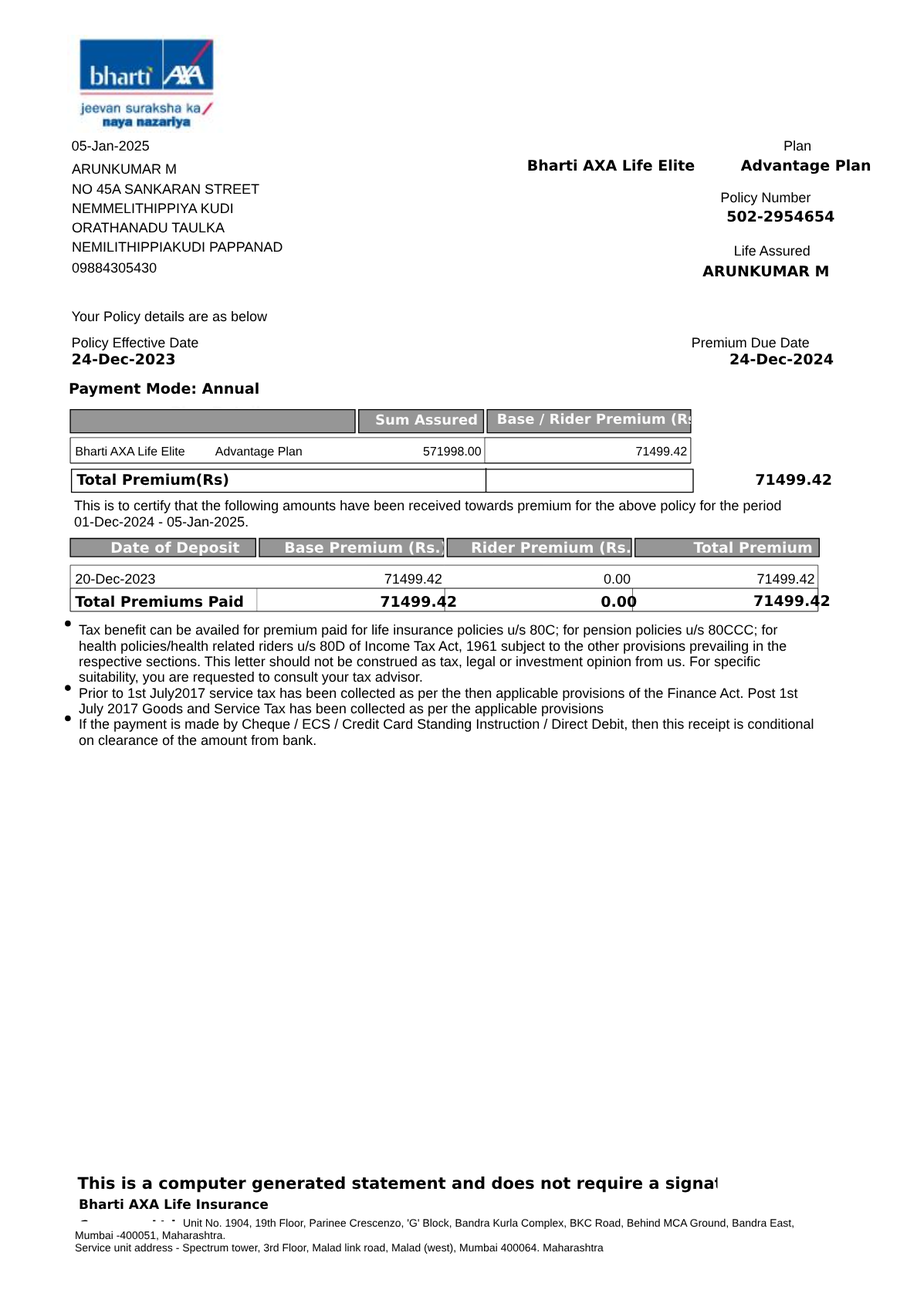
<style>
.page{position:relative;width:917px;height:1300px;background:#ffffff}
.page>*{position:absolute;margin:0}
.t1{font:13.9px "ArialMT";color:#000000}
.t2{font:14.7px "Arial-Bold";color:#000000}
.t3{font:13.9px/19.4px "ArialMT";color:#000000}
.t4{font:13.9px/15.7px "ArialMT";color:#000000}
.t5{font:13.9px/19.5px "ArialMT";color:#000000}
.t6{font:13.9px/20.7px "ArialMT";color:#000000}
.t7{font:14.7px/23.1px "Arial-Bold";color:#fafafa}
.t8{font:13.9px "Arial-Bold";color:#fafafa}
.t9{font:12.4px "ArialMT";color:#000000}
.t10{font:13.9px/23.1px "ArialMT";color:#000000}
.t11{font:14.7px "Arial-Bold";color:#fafafa}
.t12{font:16.2px "Arial-Bold";color:#000000}
.t13{font:13.1px/20.7px "Arial-Bold";color:#000000}
.t14{font:13.1px/17px "Arial-Bold";color:#000000}
.t15{font:10.8px/17px "ArialMT";color:#000000}
.t16{font:10.8px/12.6px "ArialMT";color:#000000}
</style>
<div class="page">
<p class="t1" style="left:72px;top:141px;width:77px;height:10px">05-Jan-2025</p>
<p class="t1" style="left:784px;top:140px;width:27px;height:11px">Plan</p>
<p class="t2" style="left:528px;top:159px;width:343px;height:15px">Bharti AXA Life Elite         Advantage Plan</p>
<p class="t3" style="left:72px;top:164px;width:211px;height:109px"><span class="t4">ARUNKUMAR M</span><br>NO 45A SANKARAN STREET<span class="t5"><br>NEMMELITHIPPIYA KUDI</span><br>ORATHANADU TAULKA<br>NEMILITHIPPIAKUDI PAPPANAD<span class="t6"><br>09884305430</span></p>
<p class="t1" style="left:721px;top:191px;width:90px;height:14px">Policy Number</p>
<p class="t2" style="left:727px;top:210px;width:108px;height:12px">502-2954654</p>
<p class="t1" style="left:735px;top:245px;width:75px;height:11px">Life Assured</p>
<p class="t2" style="left:703px;top:266px;width:125px;height:11px">ARUNKUMAR M</p>
<p class="t1" style="left:72px;top:310px;width:196px;height:14px">Your Policy details are as below</p>
<p class="t1" style="left:73px;top:337px;width:125px;height:14px">Policy Effective Date</p>
<p class="t1" style="left:693px;top:337px;width:116px;height:11px">Premium Due Date</p>
<p class="t2" style="left:73px;top:353px;width:102px;height:12px">24-Dec-2023</p>
<p class="t2" style="left:730px;top:353px;width:104px;height:12px">24-Dec-2024</p>
<p class="t2" style="left:69px;top:382px;width:200px;height:36px">Payment Mode: Annual<span class="t7"><br>Plan Details</span></p>
<p class="t8" style="left:376px;top:414px;width:101px;height:11px">Sum Assured</p>
<p class="t8" style="left:498px;top:413px;width:209px;height:13px">Base / Rider Premium (Rs.)</p>
<p class="t9" style="left:76px;top:446px;width:226px;height:13px">Bharti AXA Life Elite         Advantage Plan</p>
<p class="t9" style="left:423px;top:446px;width:59px;height:10px">571998.00</p>
<p class="t9" style="left:636px;top:446px;width:51px;height:10px">71499.42</p>
<p class="t2" style="left:76px;top:473px;width:755px;height:14px">Total Premium(Rs)                                                                                                       71499.42</p>
<p class="t10" style="left:74px;top:500px;width:707px;height:27px">This is to certify that the following amounts have been received towards premium for the above policy for the period   <span class="t4"><br>01-Dec-2024 - 05-Jan-2025.</span></p>
<p class="t11" style="left:111px;top:541px;width:129px;height:15px">Date of Deposit</p>
<p class="t11" style="left:286px;top:541px;width:160px;height:14px">Base Premium (Rs.)</p>
<p class="t11" style="left:472px;top:541px;width:165px;height:14px">Rider Premium (Rs.)</p>
<p class="t11" style="left:693px;top:541px;width:119px;height:13px">Total Premium</p>
<p class="t1" style="left:76px;top:574px;width:79px;height:10px">20-Dec-2023</p>
<p class="t1" style="left:384px;top:574px;width:58px;height:10px">71499.42</p>
<p class="t1" style="left:604px;top:574px;width:27px;height:10px">0.00</p>
<p class="t1" style="left:757px;top:574px;width:57px;height:10px">71499.42</p>
<p class="t2" style="left:75px;top:595px;width:168px;height:13px">Total Premiums Paid</p>
<p class="t2" style="left:381px;top:595px;width:75px;height:13px">71499.42</p>
<p class="t2" style="left:601px;top:595px;width:36px;height:13px">0.00</p>
<p class="t2" style="left:754px;top:594px;width:76px;height:13px">71499.42</p>
<p class="t4" style="left:79px;top:624px;width:735px;height:122px">Tax benefit can be availed for premium paid for life insurance policies u/s 80C; for pension policies u/s 80CCC; for <br>health policies/health related riders u/s 80D of Income Tax Act, 1961 subject to the other provisions prevailing in the <br>respective sections. This letter should not be construed as tax, legal or investment opinion from us. For specific <br>suitability, you are requested to consult your tax advisor.<br>Prior to 1st July2017 service tax has been collected as per the then applicable provisions of the Finance Act. Post 1st <br>July 2017 Goods and Service Tax has been collected as per the applicable provisions<br>If the payment is made by Cheque / ECS / Credit Card Standing Instruction / Direct Debit, then this receipt is conditional <br>on clearance of the amount from bank.</p>
<p class="t12" style="left:77px;top:1177px;width:681px;height:16px">This is a computer generated statement and does not require a signature.</p>
<p class="t13" style="left:79px;top:1199px;width:190px;height:34px">Bharti AXA Life Insurance Company Ltd.<span class="t14"><br>Registered Office:</span></p>
<p class="t15" style="left:75px;top:1218px;width:719px;height:36px">Unit No. 1904, 19th Floor, Parinee Crescenzo, 'G' Block, Bandra Kurla Complex, BKC Road, Behind MCA Ground, Bandra East, <span class="t16"><br>Mumbai -400051, Maharashtra.</span><span class="t16"><br>Service unit address - Spectrum tower, 3rd Floor, Malad link road, Malad (west), Mumbai 400064. Maharashtra</span></p>
</div>
